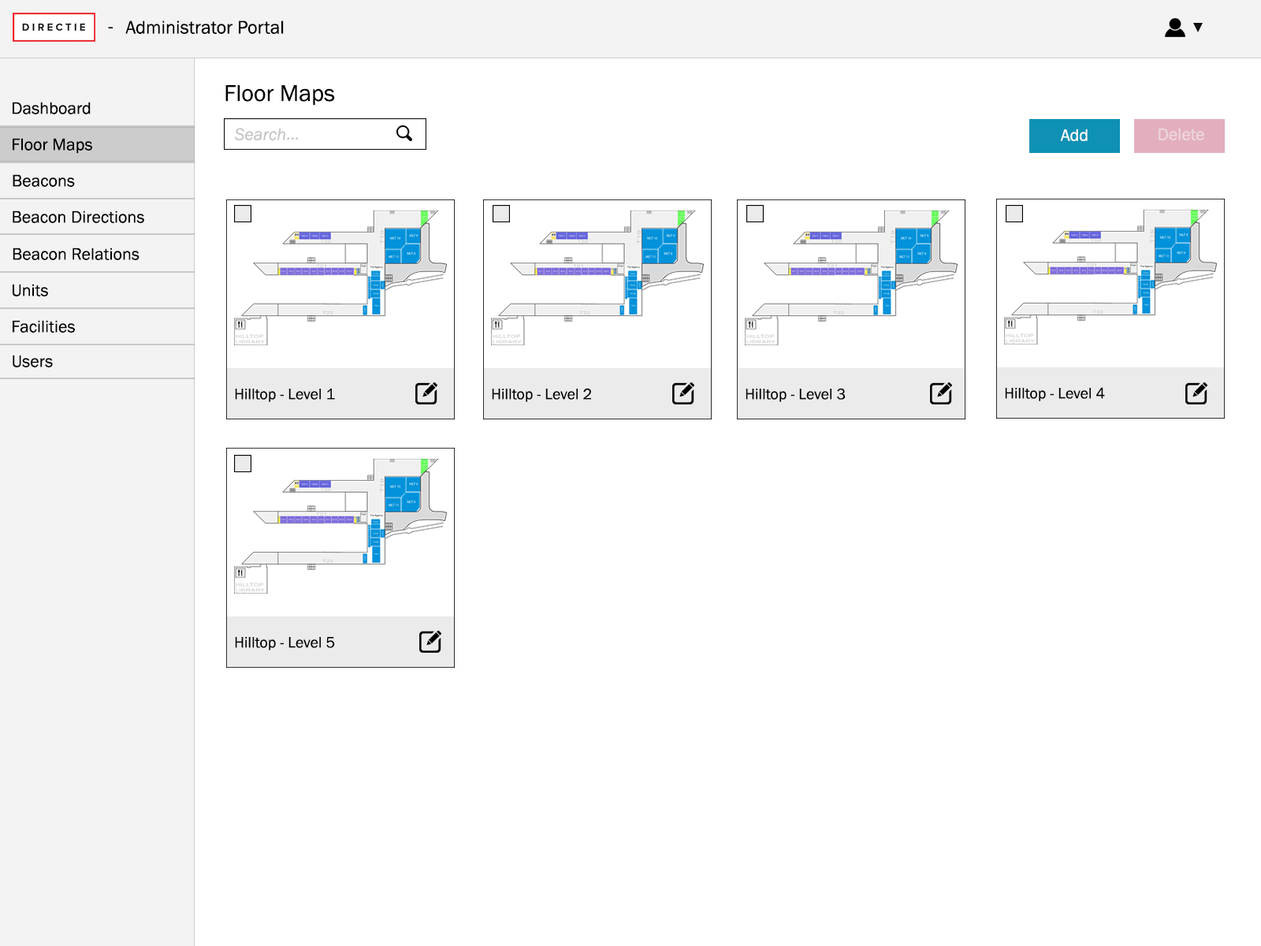
<style>
.page{position:relative;width:1261px;height:946px;background:#ffffff}
.page>*{position:absolute;margin:0}
.t1{font:18.9px "FranklinGothic-Book";color:#000000}
.t2{font:23.6px "FranklinGothic-Book";color:#000000}
.t3{font:17.3px "FranklinGothic-Book";color:#000000}
.t4{font:17.3px "FranklinGothic-Book";color:#ffffff}
.t5{font:17.3px "FranklinGothic-Book";color:#edd6db}
.t6{font:15.7px "FranklinGothic-Book";color:#000000}
</style>
<div class="page">
<p class="t1" style="left:108px;top:27px;width:5px;height:1px">-</p>
<p class="t1" style="left:125px;top:20px;width:159px;height:14px">Administrator Portal</p>
<p class="t2" style="left:225px;top:85px;width:110px;height:21px">Floor Maps</p>
<p class="t3" style="left:13px;top:102px;width:78px;height:12px">Dashboard</p>
<p class="t3" style="left:13px;top:138px;width:79px;height:16px">Floor Maps</p>
<p class="t4" style="left:1060px;top:129px;width:28px;height:12px">Add</p>
<p class="t5" style="left:1158px;top:128px;width:46px;height:12px">Delete</p>
<p class="t3" style="left:13px;top:174px;width:62px;height:13px">Beacons</p>
<p class="t3" style="left:13px;top:210px;width:131px;height:13px">Beacon Directions</p>
<p class="t3" style="left:13px;top:247px;width:126px;height:13px">Beacon Relations</p>
<p class="t3" style="left:13px;top:284px;width:35px;height:12px">Units</p>
<p class="t3" style="left:13px;top:320px;width:62px;height:13px">Facilities</p>
<p class="t3" style="left:13px;top:355px;width:40px;height:12px">Users</p>
<p class="t6" style="left:235px;top:388px;width:100px;height:14px">Hilltop - Level 1</p>
</div>
